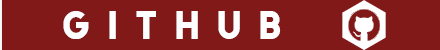
<style>
.page{position:relative;width:440px;height:50px;background:#811919}
.page>*{position:absolute;margin:0}
.t1{font:37.5px "TheNextFont";letter-spacing:0.48em;color:#ffffff}
</style>
<div class="page">
<p class="t1" style="left:63px;top:11px;width:218px;height:28px">GITHUB</p>
</div>
